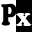
<style>
.page{position:relative;width:32px;height:32px;background:#000000}
.page>*{position:absolute;margin:0}
.t1{font:30.3px "CooperBlackStd";letter-spacing:0.2em;color:#000000;scale:0.72 1}
.t2{font:18px "CooperBlackStd";letter-spacing:0.2em;color:#fefefe}
</style>
<div class="page">
<p class="t1" style="left:1px;top:3px;width:16px;height:23px">P</p>
<p class="t2" style="left:16px;top:13px;width:16px;height:13px">X</p>
</div>
